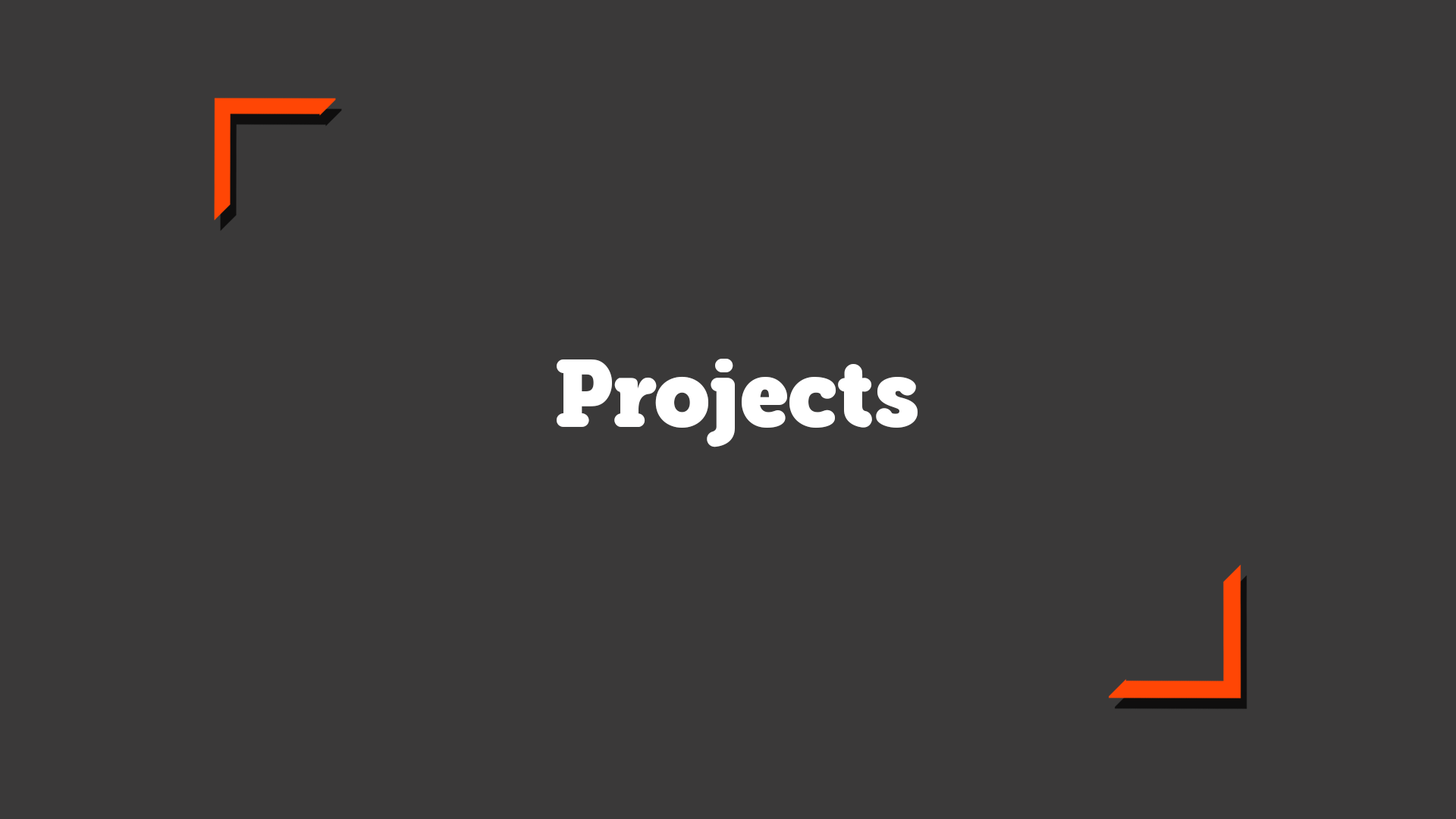
<style>
.page{position:relative;width:1456px;height:819px;background:#3a3939}
.page>*{position:absolute;margin:0}
.t1{font:91px "eacologica-round_slab";color:#ffffff}
</style>
<div class="page">
<p class="t1" style="left:557px;top:359px;width:361px;height:88px">Projects</p>
</div>
